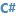
<style>
.page{position:relative;width:16px;height:16px;background:#ffffff}
.page>*{position:absolute;margin:0}
.t1{font:13px "SegoeUI-Bold";color:#4d86b4}
</style>
<div class="page">
<p class="t1" style="left:0px;top:3px;width:16px;height:10px">C#</p>
</div>
